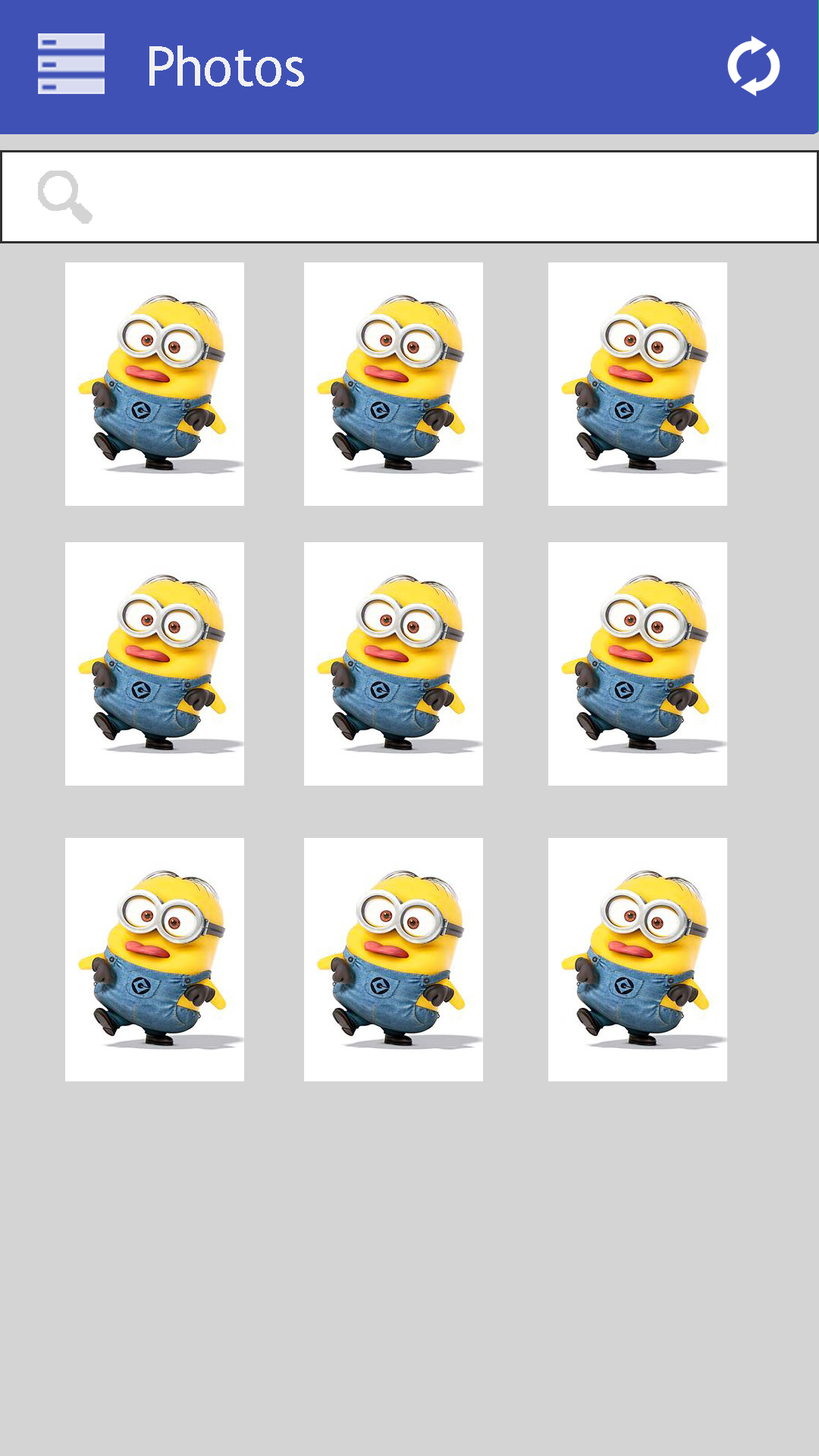
<style>
.page{position:relative;width:819px;height:1456px;background:#d5d4d4}
.page>*{position:absolute;margin:0}
.t1{font:54.6px "TrebuchetMS";color:#f1f1f1}
</style>
<div class="page">
<p class="t1" style="left:149px;top:45px;width:155px;height:41px">Photos</p>
</div>
